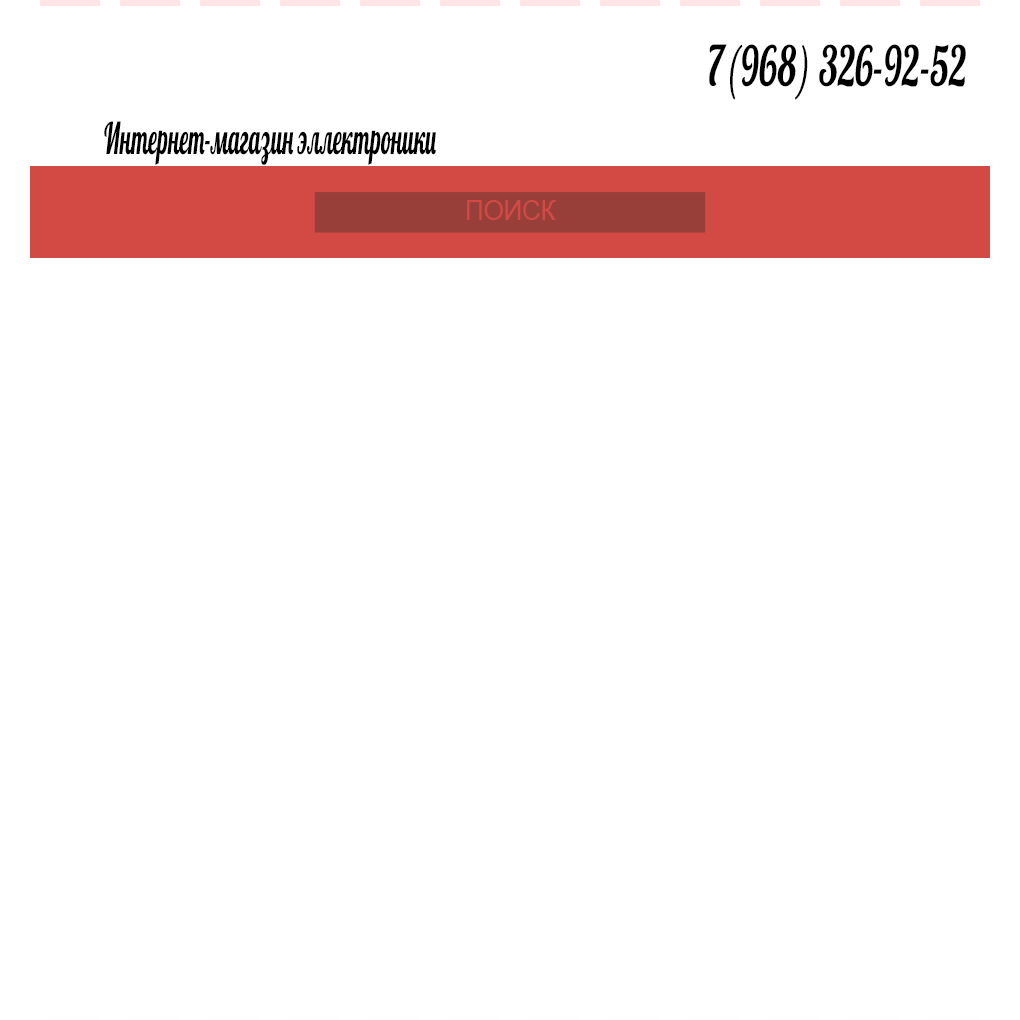
<style>
.page{position:relative;width:1020px;height:1020px;background:#ffffff}
.page>*{position:absolute;margin:0}
.t1{font:55.1px "Lobster";color:#000000;scale:0.66 1}
.t2{font:43.6px "Lobster";color:#000000;scale:0.52 1}
.t3{font:28.4px "ArialMT";color:#d24a43;scale:0.91 1}
</style>
<div class="page">
<p class="t1" style="left:709px;top:44px;width:257px;height:56px">7(968) 326-92-52</p>
<p class="t2" style="left:104px;top:121px;width:332px;height:44px">Интернет-магазин эллектроники</p>
<p class="t3" style="left:467px;top:200px;width:89px;height:20px">ПОИСК</p>
</div>
